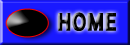
<style>
.page{position:relative;width:130px;height:45px;background:#1919ff}
.page>*{position:absolute;margin:0}
.t1{font:24px "GothicXB-HM"}
</style>
<div class="page">
<p class="t1" style="left:58px;top:12px;width:58px;height:19px">HOME</p>
</div>
